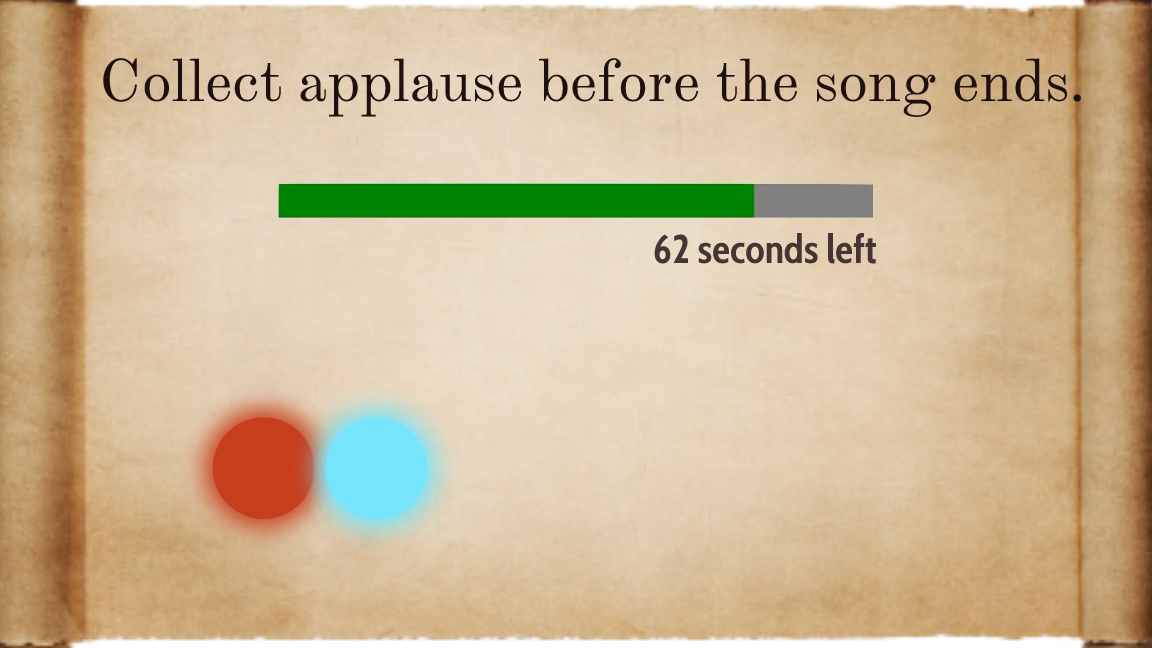
<style>
.page{position:relative;width:1152px;height:648px}
.page>*{position:absolute;margin:0}
.t1{font:59px "TheanoModern-Regular";color:#1f1010}
.t2{font:40px "CabinCondensed-Bold";color:#453535}
</style>
<div class="page">
<p class="t1" style="left:103px;top:58px;width:978px;height:59px">Collect applause before the song ends.</p>
<p class="t2" style="left:654px;top:233px;width:222px;height:31px">62 seconds left</p>
</div>
